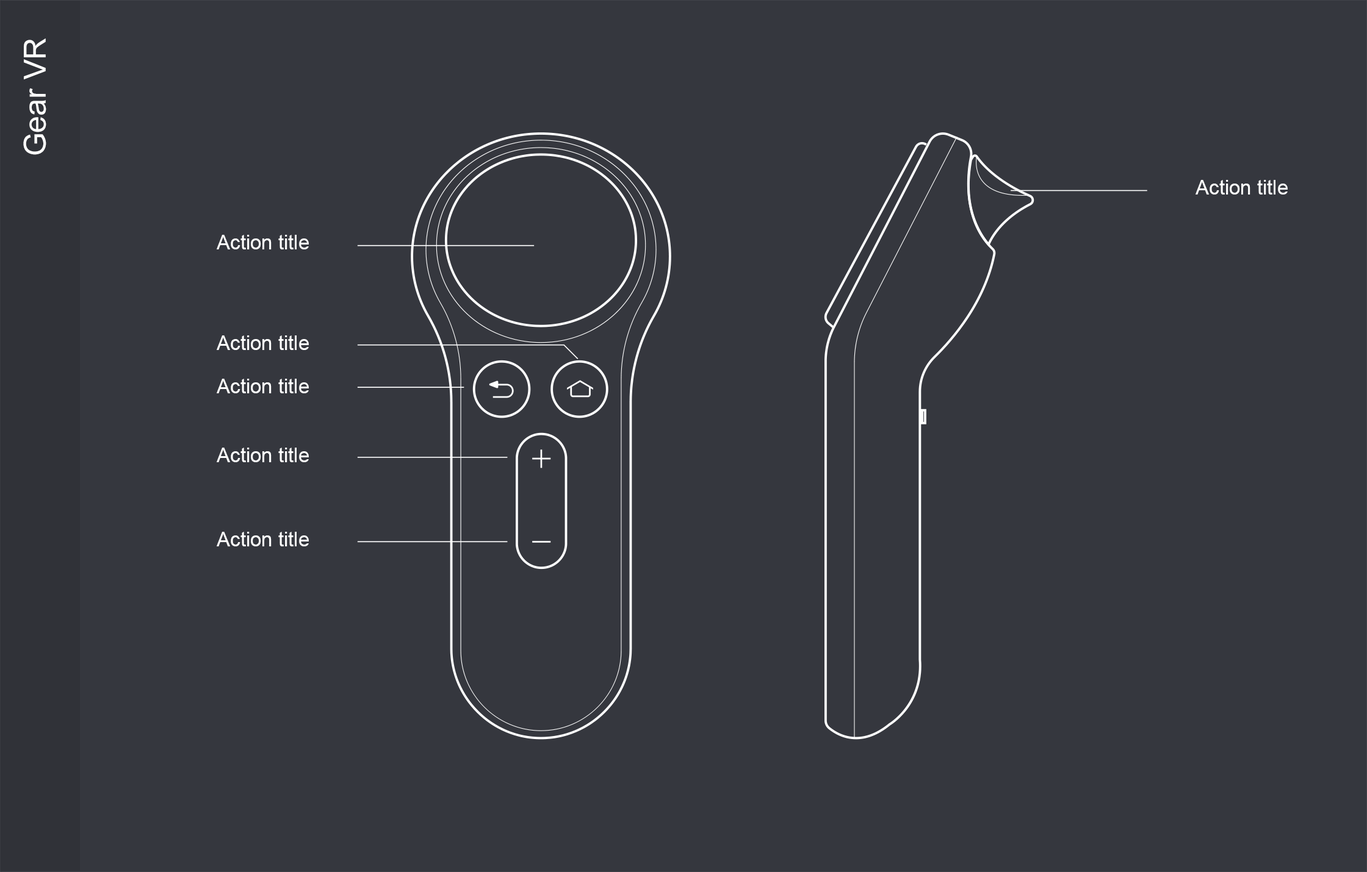
<style>
.page{position:relative;width:1367px;height:872px;background:#35373e}
.page>*{position:absolute;margin:0}
.t1{font:30.5px "ArialMT";color:#ffffff}
.t2{font:20px "ArialMT";color:#ffffff}
</style>
<div class="page">
<p class="t1" style="left:23px;top:38px;width:23px;height:117px;rotate:-90deg">Gear VR</p>
<p class="t2" style="left:1195px;top:180px;width:92px;height:15px">Action title</p>
<p class="t2" style="left:217px;top:235px;width:92px;height:15px">Action title</p>
<p class="t2" style="left:217px;top:336px;width:92px;height:14px">Action title</p>
<p class="t2" style="left:217px;top:379px;width:92px;height:15px">Action title</p>
<p class="t2" style="left:217px;top:448px;width:92px;height:14px">Action title</p>
<p class="t2" style="left:217px;top:532px;width:92px;height:15px">Action title</p>
</div>
